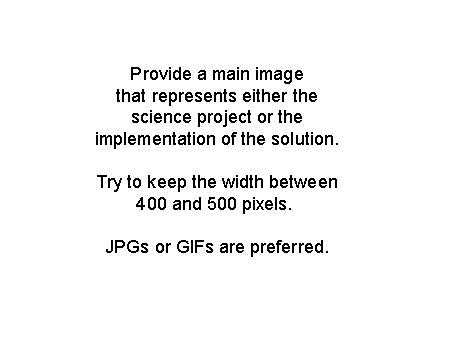
<style>
.page{position:relative;width:450px;height:350px;background:#ffffff}
.page>*{position:absolute;margin:0}
.t1{font:18px "ArialMT";letter-spacing:0.003em;color:#000000}
</style>
<div class="page">
<p class="t1" style="left:96px;top:67px;width:242px;height:190px;text-align:center">Provide a main image<br>that represents either the<br>science project or the<br>implementation of the solution.<br><br>Try to keep the width between<br>400 and 500 pixels. <br><br>JPGs or GIFs are preferred.</p>
</div>
